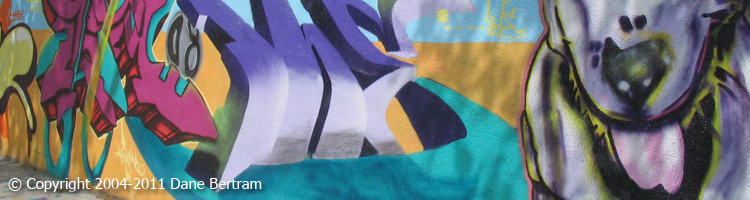
<style>
.page{position:relative;width:750px;height:200px}
.page>*{position:absolute;margin:0}
.t1{font:15px "Tahoma";color:#ffffff}
</style>
<div class="page">
<p class="t1" style="left:8px;top:177px;width:254px;height:15px">© Copyright 2004-2011 Dane Bertram</p>
</div>
